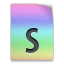
<style>
.page{position:relative;width:64px;height:64px;background:#ffffff}
.page>*{position:absolute;margin:0}
.t1{font:36px "MyriadPro-BoldCond";color:#4a5257}
</style>
<div class="page">
<p class="t1" style="left:25px;top:28px;width:14px;height:25px">S</p>
</div>
